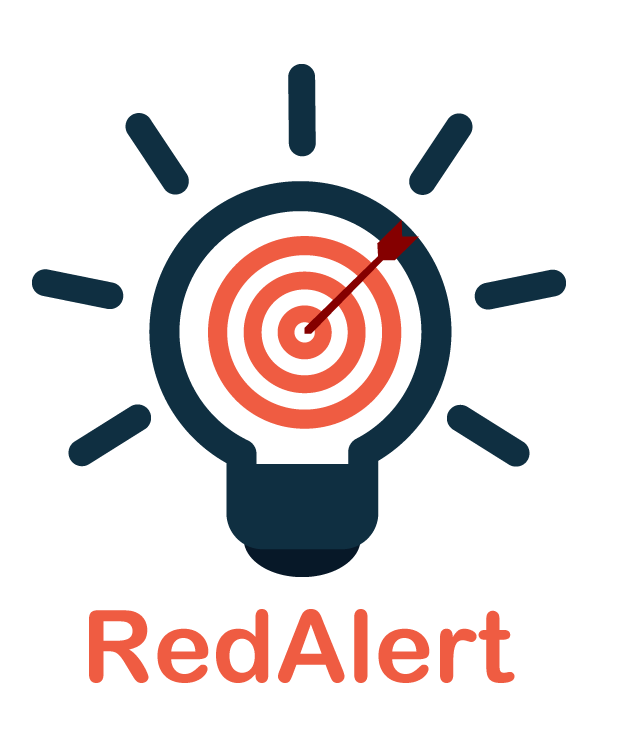
<style>
.page{position:relative;width:619px;height:729px;background:#ffffff}
.page>*{position:absolute;margin:0}
.t1{font:100px "ArialRoundedMTBold";color:#ef5c42}
</style>
<div class="page">
<p class="t1" style="left:89px;top:609px;width:426px;height:74px">RedAlert</p>
</div>
